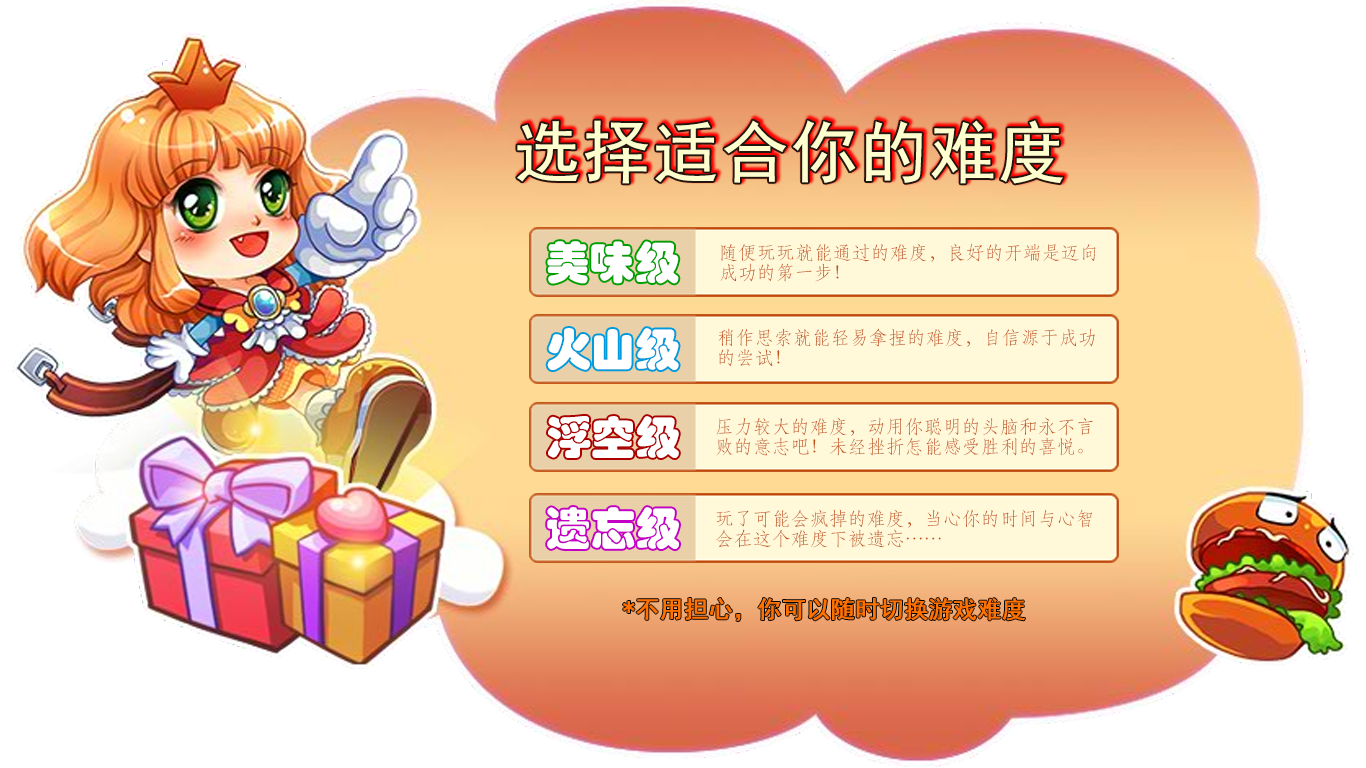
<style>
.page{position:relative;width:1366px;height:768px;background:#ffffff}
.page>*{position:absolute;margin:0}
.t1{font:115.6px "SimHei";color:#fffece;font-variant:small-caps;font-weight:bold}
.t2{font:44.8px "STHupo";color:#ffffff}
.t3{font:19px/20px "STFangsong";color:#c35014}
.t4{font:40.8px "SimHei";color:#ff7200;font-variant:small-caps;font-weight:bold}
</style>
<div class="page">
<p class="t1" style="left:517px;top:120px;width:546px;height:64px">选择适合你的难度</p>
<p class="t2" style="left:547px;top:241px;width:132px;height:43px">美味级</p>
<p class="t3" style="left:720px;top:243px;width:376px;height:39px">随便玩玩就能通过的难度，良好的开端是迈向<br>成功的第一步！</p>
<p class="t2" style="left:547px;top:328px;width:132px;height:42px">火山级</p>
<p class="t3" style="left:718px;top:328px;width:377px;height:39px">稍作思索就能轻易拿捏的难度，自信源于成功<br>的尝试！</p>
<p class="t2" style="left:548px;top:416px;width:131px;height:42px">浮空级</p>
<p class="t3" style="left:716px;top:417px;width:377px;height:39px">压力较大的难度，动用你聪明的头脑和永不言<br>败的意志吧！未经挫折怎能感受胜利的喜悦。</p>
<p class="t2" style="left:547px;top:507px;width:132px;height:42px">遗忘级</p>
<p class="t3" style="left:716px;top:509px;width:376px;height:39px">玩了可能会疯掉的难度，当心你的时间与心智<br>会在这个难度下被遗忘……</p>
<p class="t4" style="left:623px;top:598px;width:402px;height:23px">*不用担心，你可以随时切换游戏难度</p>
</div>
